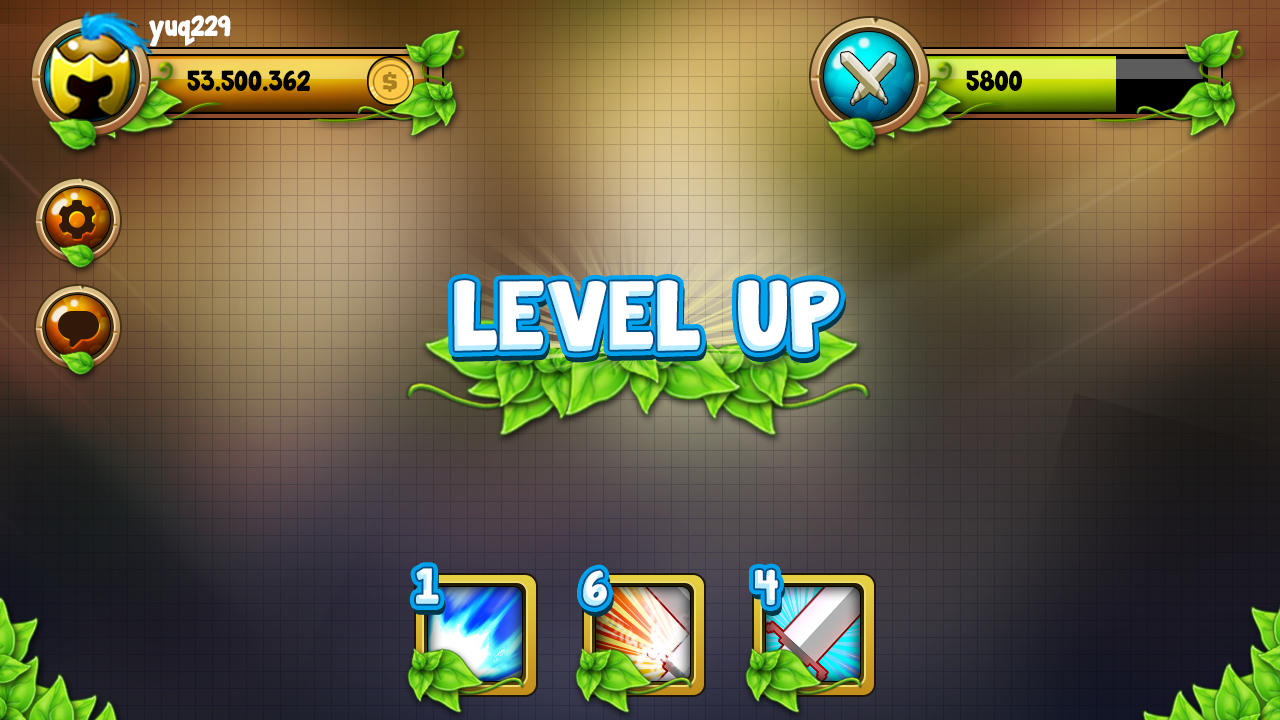
<style>
.page{position:relative;width:1280px;height:720px}
.page>*{position:absolute;margin:0}
.t1{font:25.9px "JandaManateeSolid";color:#ffffff}
.t2{font:25.9px "JandaManateeSolid";color:#000000}
.t3{font:87.5px "JandaManateeSolid";color:#ffffff;text-transform:uppercase}
.t4{font:44.1px "JandaManateeSolid";text-transform:uppercase;scale:1.05 1}
.t5{font:44.1px "JandaManateeSolid";color:#ffffff;text-transform:uppercase;scale:1.05 1}
</style>
<div class="page">
<p class="t1" style="left:149px;top:15px;width:82px;height:32px">yuq229</p>
<p class="t2" style="left:187px;top:70px;width:123px;height:21px">53.500.362</p>
<p class="t2" style="left:966px;top:70px;width:56px;height:21px">5800</p>
<p class="t3" style="left:454px;top:280px;width:385px;height:72px">level up</p>
<p class="t4" style="left:416px;top:568px;width:23px;height:36px">1</p>
<p class="t4" style="left:755px;top:569px;width:23px;height:36px">4</p>
<p class="t5" style="left:583px;top:570px;width:24px;height:36px">6</p>
</div>
